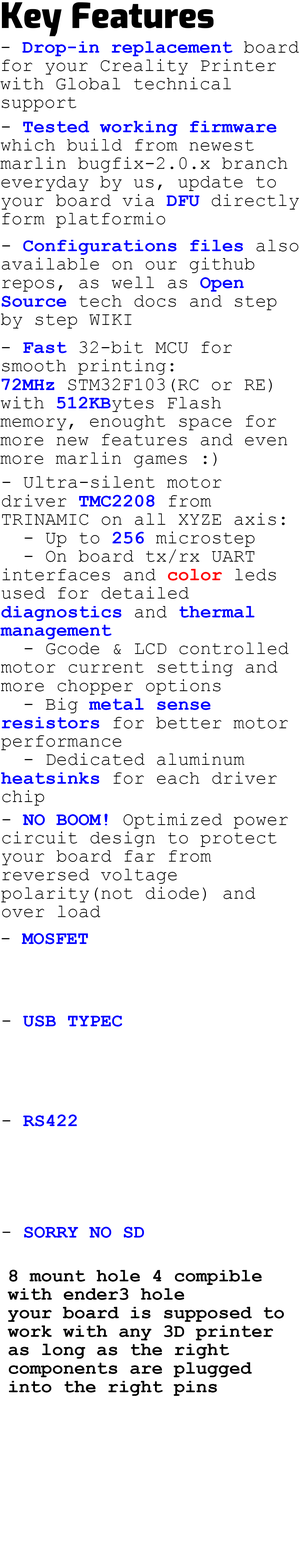
<style>
.page{position:relative;width:299px;height:1568px;background:#ffffff}
.page>*{position:absolute;margin:0}
.t1{font:34.7px "Exo-Black";color:#000000}
.t2{font:18.5px/18.5px "CourierNewPSMT";color:#000000}
.t3{font:18.5px/18.5px "CourierNewPS-BoldMT";color:#0000ff}
.t4{font:18.5px/18.5px "CourierNewPS-BoldMT";color:#ff0000}
.t5{font:18.5px "CourierNewPS-BoldMT";color:#0000ff}
.t6{font:18.5px "CourierNewPSMT";color:#000000}
.t7{font:18.5px/18.5px "CourierNewPS-BoldMT";color:#000000}
</style>
<div class="page">
<p class="t1" style="left:2px;top:2px;width:212px;height:34px">Key Features</p>
<p class="t2" style="left:0px;top:41px;width:299px;height:70px">- <span class="t3">Drop-in replacement</span> board for your Creality Printer with Global technical support</p>
<p class="t2" style="left:0px;top:121px;width:299px;height:107px">- <span class="t3">Tested working firmware</span> which build from newest marlin bugfix-2.0.x branch everyday by us, update to your board via <span class="t3">DFU </span>directly form platformio</p>
<p class="t2" style="left:1px;top:240px;width:298px;height:89px">- <span class="t3">Configurations files </span>also available on our github repos, as well as <span class="t3">Open Source</span> tech docs and step by step WIKI</p>
<p class="t2" style="left:0px;top:341px;width:288px;height:126px">- <span class="t3">Fast</span> 32-bit MCU for smooth printing: <br><span class="t3">72MHz</span> STM32F103(RC or RE) with <span class="t3">512KB</span>ytes Flash memory, enought space for more new features and even more marlin games :)<br>  -</p>
<p class="t2" style="left:0px;top:476px;width:289px;height:330px">- Ultra-silent motor  driver <span class="t3">TMC2208</span> from TRINAMIC on all XYZE axis:<br>  - Up to <span class="t3">256</span> microstep<br>  - On board tx/rx UART interfaces and <span class="t4">color </span>leds used for detailed <span class="t3">diagnostics </span>and <span class="t3">thermal management<br></span>  - Gcode &amp; LCD controlled motor current setting and more chopper options<br>  - Big <span class="t3">metal sense resistors</span> for better motor performance<br>  - Dedicated aluminum <span class="t3">heatsinks </span>for each driver chip</p>
<p class="t2" style="left:1px;top:813px;width:287px;height:104px">- <span class="t3">NO BOOM! </span>Optimized power circuit design to protect your board far from reversed voltage polarity(not diode) and over load</p>
<p class="t5" style="left:2px;top:933px;width:86px;height:11px"><span class="t6">- </span>MOSFET</p>
<p class="t5" style="left:2px;top:1015px;width:120px;height:12px"><span class="t6">- </span>USB TYPEC</p>
<p class="t5" style="left:2px;top:1114px;width:75px;height:12px"><span class="t6">- </span>RS422</p>
<p class="t5" style="left:2px;top:1227px;width:142px;height:11px"><span class="t6">- </span>SORRY NO SD</p>
<p class="t7" style="left:8px;top:1270px;width:276px;height:126px">8 mount hole 4 compible with ender3 hole<br>your board is supposed to work with any 3D printer as long as the right components are plugged into the right pins</p>
</div>
